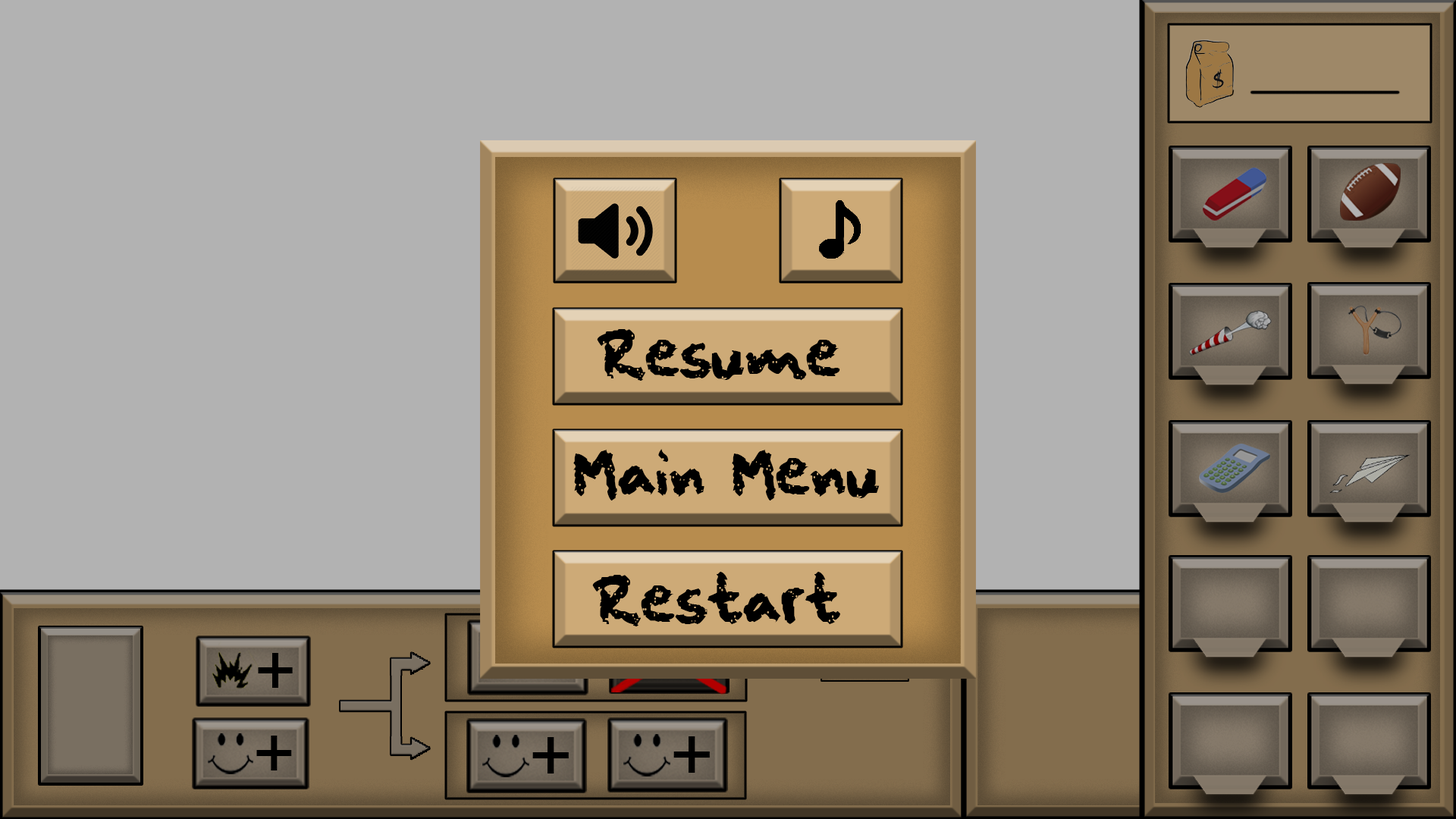
<style>
.page{position:relative;width:1456px;height:819px;background:#b2b2b2}
.page>*{position:absolute;margin:0}
.t1{font:53.1px "squeakychalksound";color:#000000}
.t2{font:11.4px "squeakychalksound"}
.t3{font:72.9px "ArialMT";color:#000000}
.t4{font:73.6px "ArialMT";color:#000000}
.t5{font:76.1px "ArialMT";color:#000000}
</style>
<div class="page">
<p class="t1" style="left:597px;top:329px;width:243px;height:52px">Resume</p>
<p class="t1" style="left:573px;top:449px;width:307px;height:51px">Main Menu</p>
<p class="t1" style="left:592px;top:572px;width:248px;height:54px">Restart</p>
<p class="t2" style="left:803px;top:638px;width:99px;height:17px">Target Priority</p>
<p class="t3" style="left:258px;top:653px;width:35px;height:35px">+</p>
<p class="t4" style="left:256px;top:736px;width:36px;height:34px">+</p>
<p class="t5" style="left:532px;top:737px;width:37px;height:36px">+</p>
<p class="t5" style="left:673px;top:736px;width:37px;height:37px">+</p>
</div>
